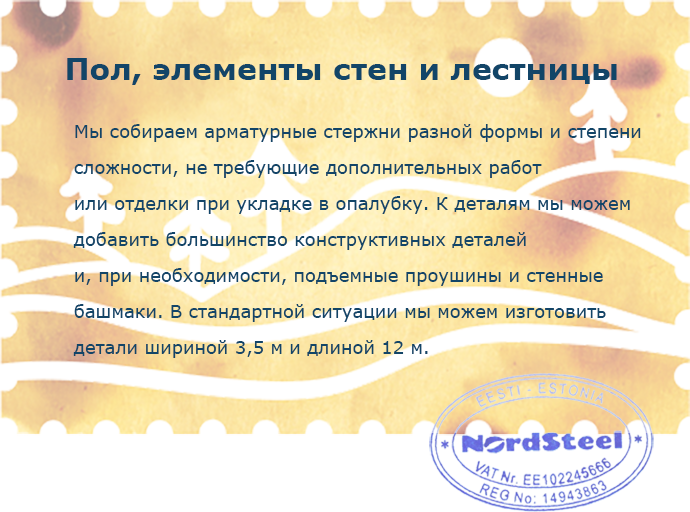
<style>
.page{position:relative;width:690px;height:512px;background:#ffffff}
.page>*{position:absolute;margin:0}
.t1{font:30px "Verdana-Bold";color:#124568}
.t2{font:18px/36px "Verdana";color:#124568}
</style>
<div class="page">
<p class="t1" style="left:67px;top:58px;width:550px;height:27px">Пол, элементы стен и лестницы</p>
<p class="t2" style="left:73px;top:124px;width:568px;height:234px">Мы собираем арматурные стержни разной формы и степени <br>сложности, не требующие дополнительных работ <br>или отделки при укладке в опалубку. К деталям мы можем <br>добавить большинство конструктивных деталей <br>и, при необходимости, подъемные проушины и стенные <br>башмаки. В стандартной ситуации мы можем изготовить <br>детали шириной 3,5 м и длиной 12 м.</p>
</div>
